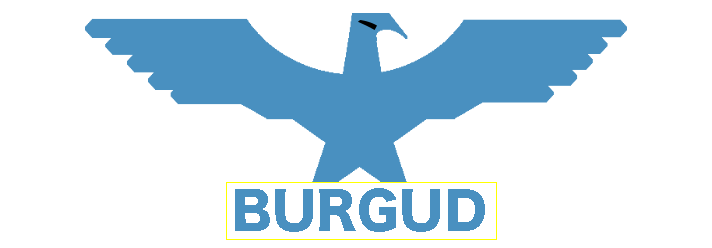
<style>
.page{position:relative;width:712px;height:248px;background:#ffffff}
.page>*{position:absolute;margin:0}
.t1{font:50px "HiraKakuStdN-W8";color:#4990c0}
</style>
<div class="page">
<p class="t1" style="left:235px;top:188px;width:250px;height:44px">BURGUD</p>
</div>
